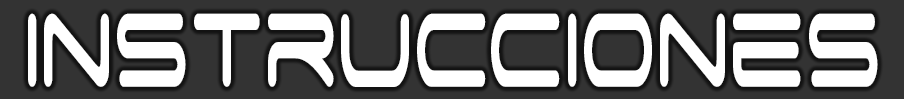
<style>
.page{position:relative;width:904px;height:99px;background:#333333}
.page>*{position:absolute;margin:0}
.t1{font:166.7px "SpaceAge";color:#ffffff;scale:0.5 1}
</style>
<div class="page">
<p class="t1" style="left:28px;top:13px;width:850px;height:74px">instrucciones</p>
</div>
